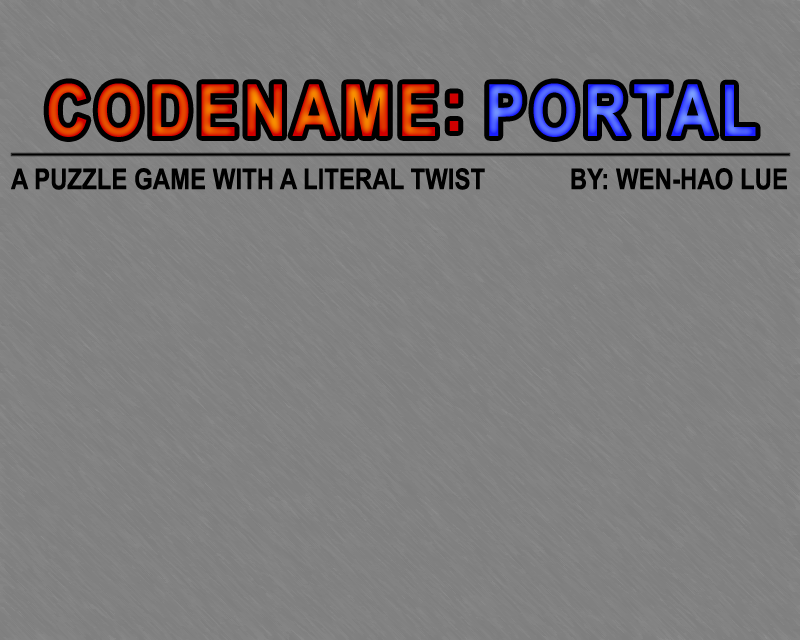
<style>
.page{position:relative;width:800px;height:640px;background:#808080}
.page>*{position:absolute;margin:0}
.t1{font:72px "Arial-BoldMT";letter-spacing:0.1em;scale:0.83 1}
.t2{font:28.8px "Arial-BoldMT";color:#000000;scale:0.83 1}
</style>
<div class="page">
<p class="t1" style="left:48px;top:83px;width:411px;height:54px">CODENAME:</p>
<p class="t1" style="left:489px;top:83px;width:267px;height:54px">PORTAL</p>
<p class="t2" style="left:11px;top:168px;width:474px;height:22px">A PUZZLE GAME WITH A LITERAL TWIST</p>
<p class="t2" style="left:571px;top:168px;width:216px;height:22px">BY: WEN-HAO LUE</p>
</div>
